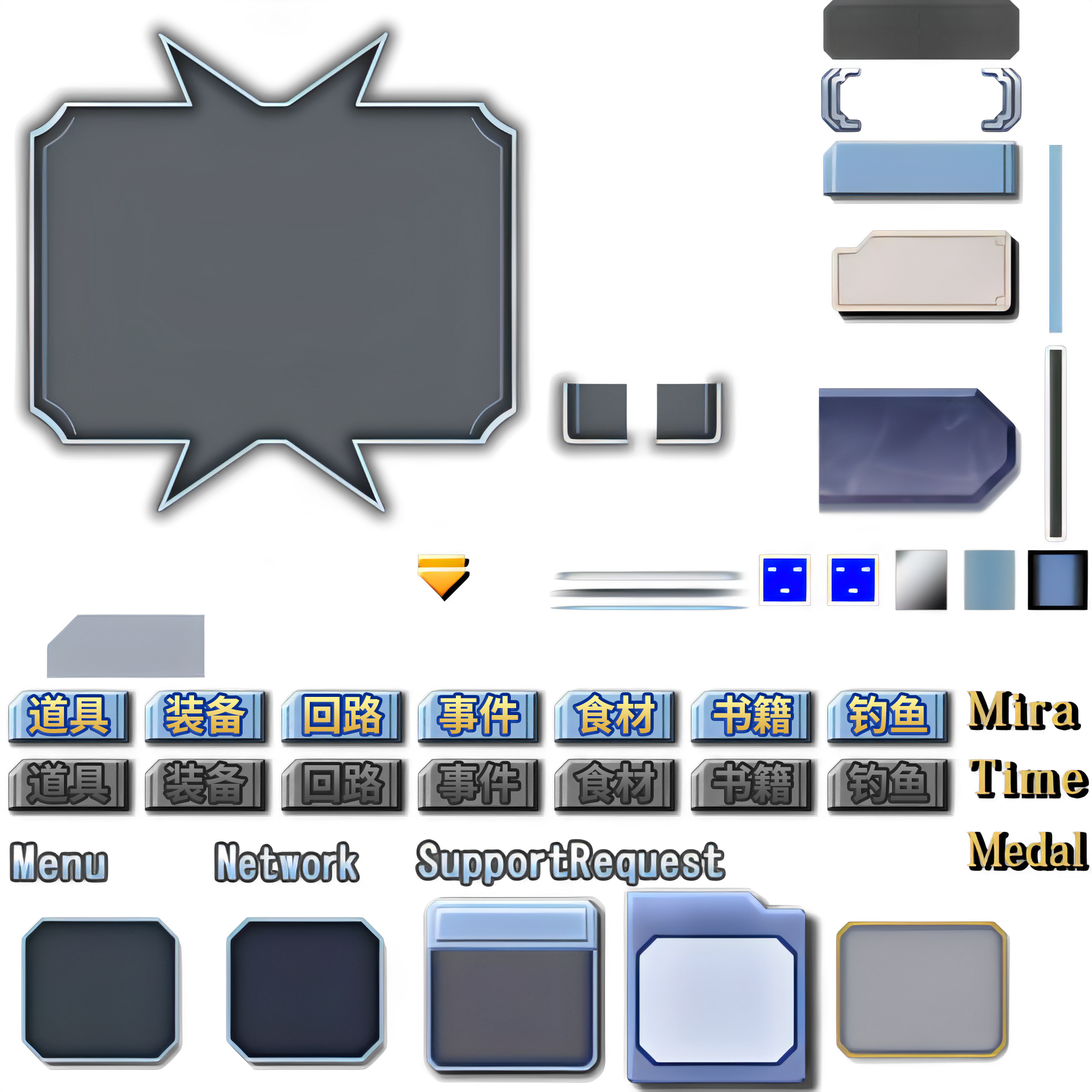
<style>
.page{position:relative;width:1092px;height:1092px;background:#ffffff}
.page>*{position:absolute;margin:0}
.t1{font:40.5px "SourceHanSansSC-Bold"}
</style>
<div class="page">
<p class="t1" style="left:29px;top:695px;width:79px;height:39px">道具</p>
<p class="t1" style="left:166px;top:695px;width:79px;height:39px">装备</p>
<p class="t1" style="left:304px;top:695px;width:78px;height:39px">回路</p>
<p class="t1" style="left:439px;top:695px;width:79px;height:39px">事件</p>
<p class="t1" style="left:575px;top:695px;width:80px;height:39px">食材</p>
<p class="t1" style="left:714px;top:695px;width:77px;height:39px">书籍</p>
<p class="t1" style="left:849px;top:695px;width:78px;height:39px">钓鱼</p>
</div>
